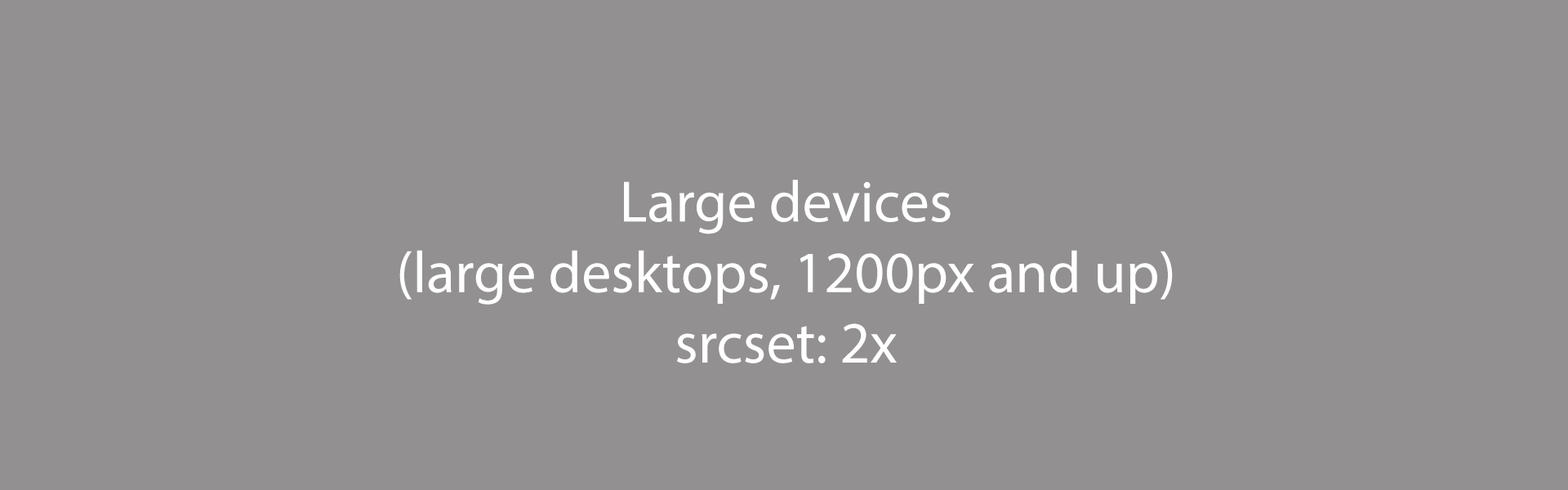
<style>
.page{position:relative;width:1568px;height:490px;background:#929090}
.page>*{position:absolute;margin:0}
.t1{font:58.8px "MyriadPro-Regular";color:#ffffff}
</style>
<div class="page">
<p class="t1" style="left:399px;top:180px;width:774px;height:183px;text-align:center">Large devices <br>(large desktops, 1200px and up)<br>srcset: 2x</p>
</div>
